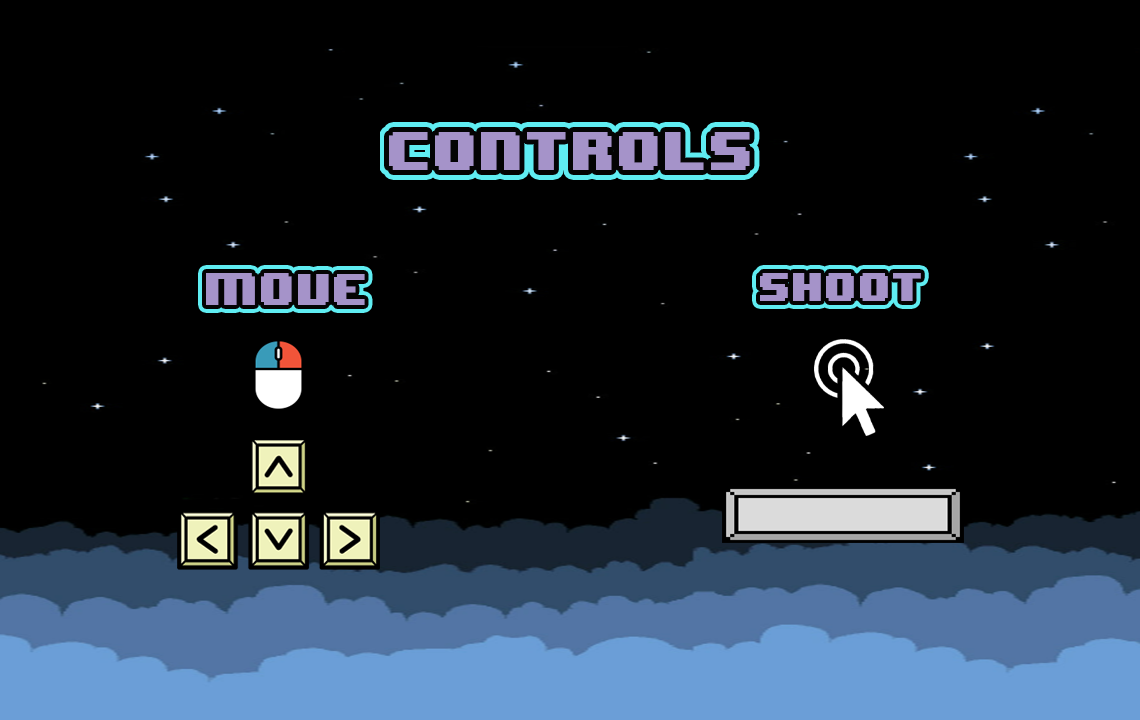
<style>
.page{position:relative;width:1140px;height:720px;background:#000000}
.page>*{position:absolute;margin:0}
.t1{font:37.7px "8BITWONDERNominal";color:#a593c9}
.t2{font:33.3px "8BITWONDERNominal";color:#a593c9}
</style>
<div class="page">
<p class="t1" style="left:206px;top:273px;width:159px;height:32px">MOve</p>
<p class="t2" style="left:760px;top:273px;width:161px;height:28px">Shoot</p>
</div>
